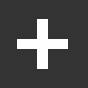
<style>
.page{position:relative;width:88px;height:88px;background:#333333}
.page>*{position:absolute;margin:0}
.t1{font:100px "ArialMT";color:#ffffff;font-weight:bold}
</style>
<div class="page">
<p class="t1" style="left:17px;top:19px;width:51px;height:50px">+</p>
</div>
